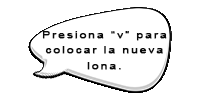
<style>
.page{position:relative;width:200px;height:100px;background:#ffffff}
.page>*{position:absolute;margin:0}
.t1{font:9.5px "ArialMT";letter-spacing:0.137em;color:#0a0a0a;font-weight:bold;scale:1.27 1}
</style>
<div class="page">
<p class="t1" style="left:42px;top:31px;width:125px;height:39px;text-align:center">Presiona “v” para<br>colocar la nueva<br>lona.</p>
</div>
